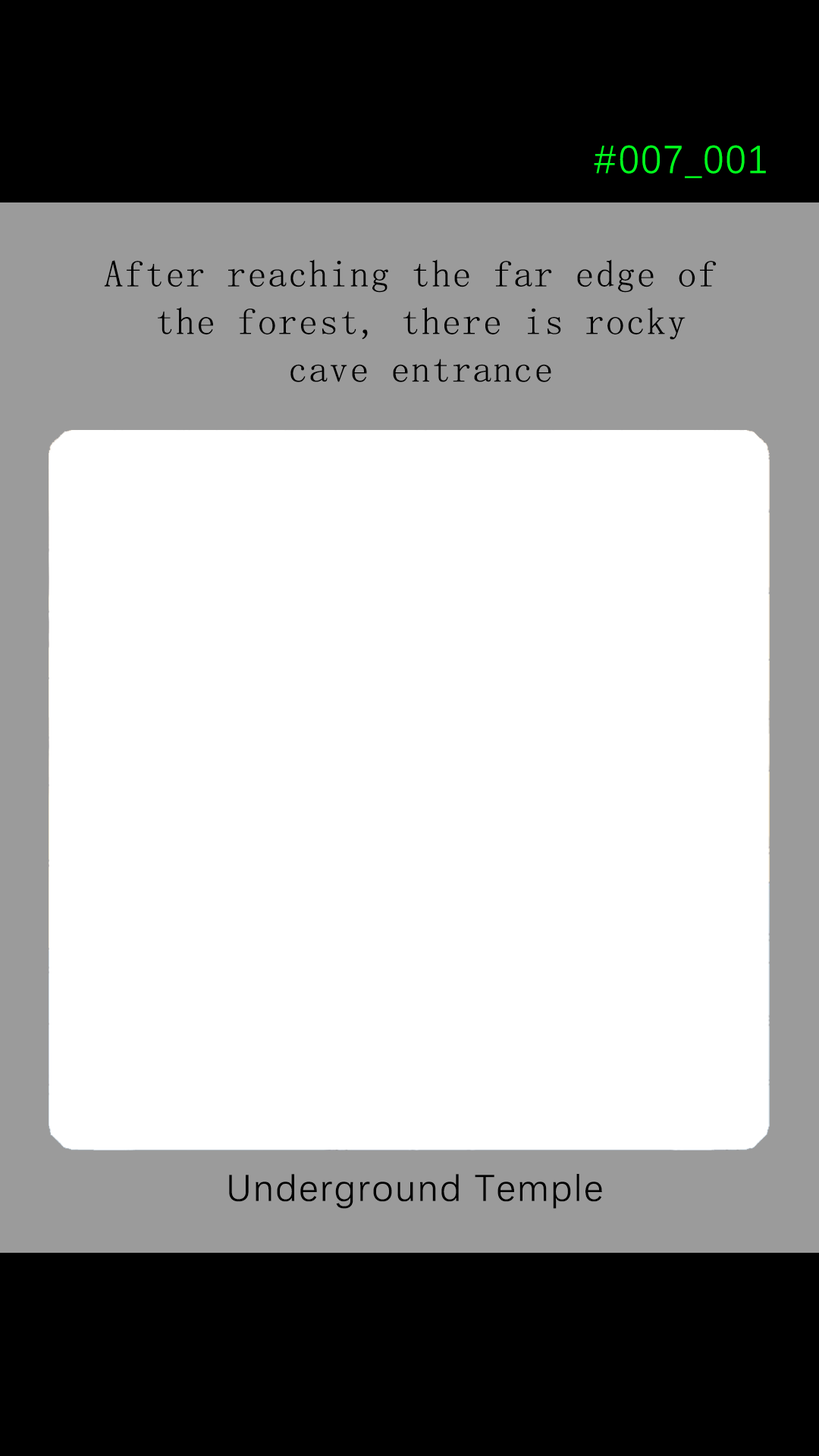
<style>
.page{position:relative;width:819px;height:1456px;background:#ffffff}
.page>*{position:absolute;margin:0}
.t1{font:39.2px "DengXian-Regular";letter-spacing:0.04em;color:#00ff1e}
.t2{font:37.9px/47.6px "SimSun";letter-spacing:0.04em;color:#000000}
.t3{font:37.9px "DengXian-Regular";letter-spacing:0.04em;color:#000000}
</style>
<div class="page">
<p class="t1" style="left:594px;top:145px;width:172px;height:33px">#007_001</p>
<p class="t2" style="left:104px;top:259px;width:613px;height:123px;text-align:center">After reaching the far edge of <br>the forest, there is rocky<br>cave entrance</p>
<p class="t3" style="left:229px;top:1174px;width:373px;height:35px">Underground Temple</p>
</div>
